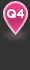
<style>
.page{position:relative;width:30px;height:70px;background:#333333}
.page>*{position:absolute;margin:0}
.t1{font:12px "Gotham-Bold";color:#ffffff}
</style>
<div class="page">
<p class="t1" style="left:6px;top:9px;width:19px;height:9px">Q4</p>
</div>
